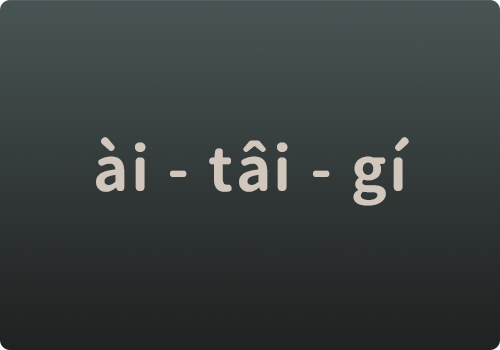
<style>
.page{position:relative;width:500px;height:350px}
.page>*{position:absolute;margin:0}
.t1{font:60px "GenSenRoundedTW-B";letter-spacing:0.04em;color:#d1c7bc}
</style>
<div class="page">
<p class="t1" style="left:96px;top:137px;width:313px;height:69px">ài - tâi - gí</p>
</div>
